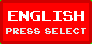
<style>
.page{position:relative;width:92px;height:44px;background:#ff0000}
.page>*{position:absolute;margin:0}
.t1{font:20px "ArcadeClassic";color:#ffffff}
.t2{font:12.4px "ArcadeClassic";color:#e6e6e6;scale:0.97 1}
</style>
<div class="page">
<p class="t1" style="left:8px;top:11px;width:76px;height:10px">english</p>
<p class="t2" style="left:6px;top:28px;width:80px;height:6px">press  select</p>
</div>
